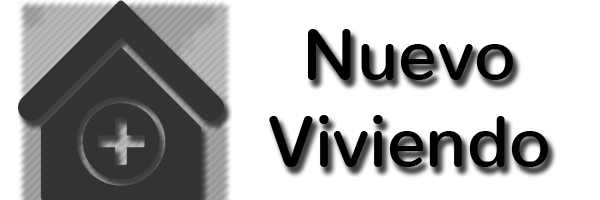
<style>
.page{position:relative;width:600px;height:200px;background:#ffffff}
.page>*{position:absolute;margin:0}
.t1{font:72px "Nunito-SemiBold";color:#000000}
</style>
<div class="page">
<p class="t1" style="left:269px;top:29px;width:279px;height:138px;text-align:center">Nuevo<br>Viviendo</p>
</div>
